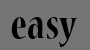
<style>
.page{position:relative;width:90px;height:50px;background:#757575}
.page>*{position:absolute;margin:0}
.t1{font:44px "NuevaStd-BoldCond";color:#000000}
</style>
<div class="page">
<p class="t1" style="left:11px;top:17px;width:66px;height:30px">easy</p>
</div>
